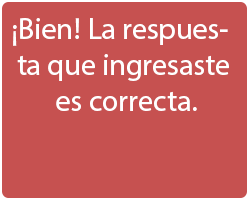
<style>
.page{position:relative;width:250px;height:200px;background:#c65150}
.page>*{position:absolute;margin:0}
.t1{font:30px "MyriadHebrew-Regular";color:#ffffff}
</style>
<div class="page">
<p class="t1" style="left:13px;top:25px;width:4px;height:21px">¡</p>
<p class="t1" style="left:17px;top:18px;width:212px;height:93px;text-align:center">Bien! La respuesta que ingresaste es correcta</p>
<p class="t1" style="left:193px;top:107px;width:4px;height:4px">.</p>
</div>
